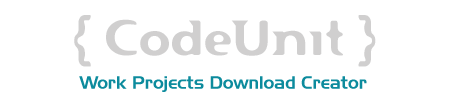
<style>
.page{position:relative;width:453px;height:106px;background:#ffffff}
.page>*{position:absolute;margin:0}
.t1{font:48px "Flexure";color:#bcbbbb}
.t2{font:18px "Slicker";color:#0c8b9d}
</style>
<div class="page">
<p class="t1" style="left:74px;top:15px;width:302px;height:52px;opacity:0.7">{ CodeUnit }</p>
<p class="t2" style="left:79px;top:76px;width:288px;height:16px">Work Projects Download Creator</p>
</div>
